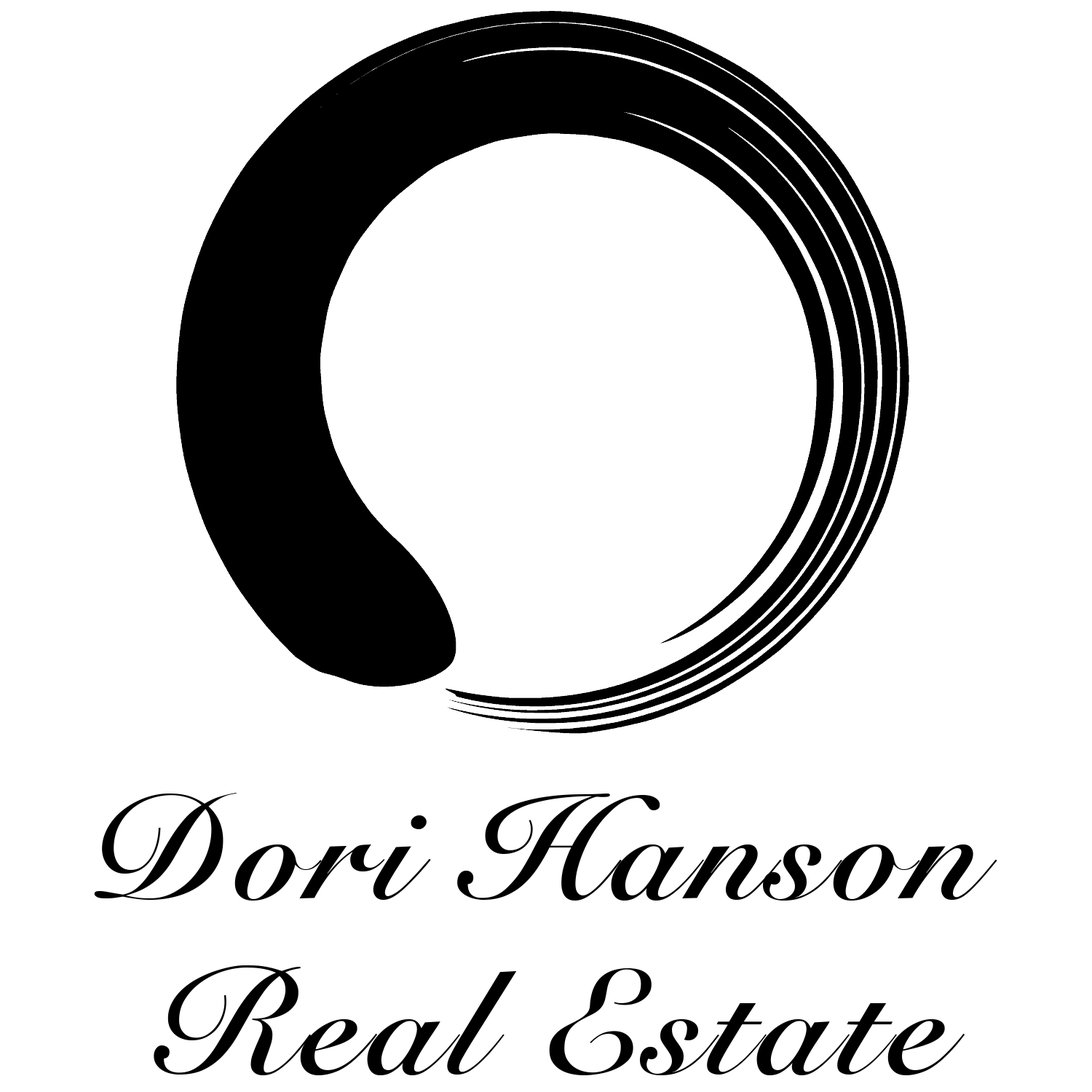
<style>
.page{position:relative;width:1092px;height:1092px;background:#ffffff}
.page>*{position:absolute;margin:0}
.t1{font:145.6px "SnellRoundhand-Bold";letter-spacing:0.05em;color:#000000}
</style>
<div class="page">
<p class="t1" style="left:94px;top:793px;width:903px;height:282px;text-align:center">Dori Hanson <br>Real Estate</p>
</div>
